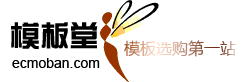
<style>
.page{position:relative;width:244px;height:82px;background:#ffffff}
.page>*{position:absolute;margin:0}
.t1{font:29.5px "FZZYJW--GB1-0";color:#000000}
.t2{font:16px "MicrosoftYaHei"}
.t3{font:14px "ArialMT";color:#000000}
</style>
<div class="page">
<p class="t1" style="left:11px;top:22px;width:87px;height:27px">模板堂</p>
<p class="t2" style="left:124px;top:40px;width:112px;height:17px">模板选购第一站</p>
<p class="t3" style="left:12px;top:58px;width:88px;height:10px">ecmoban.com</p>
</div>
